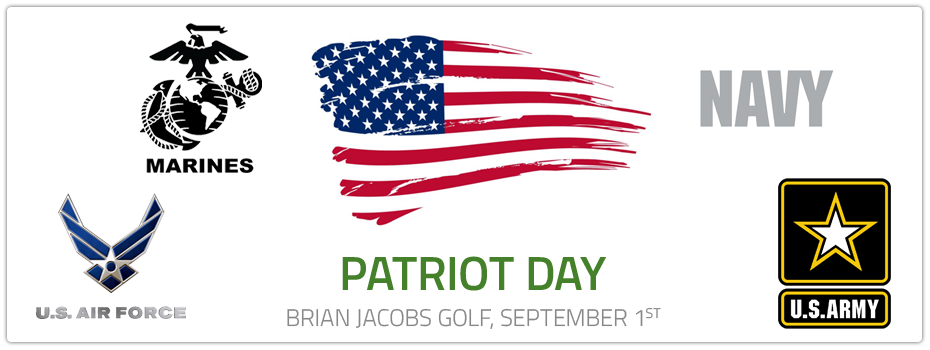
<style>
.page{position:relative;width:930px;height:350px;background:#ffffff}
.page>*{position:absolute;margin:0}
.t1{font:24px/36px "TitilliumWeb-Light";color:#888888;text-transform:uppercase}
.t2{font:48px/36px "TitilliumWeb-SemiBold";color:#45812b;text-transform:uppercase}
</style>
<div class="page">
<p class="t1" style="left:287px;top:256px;width:374px;height:73px;text-align:center"><span class="t2">Patriot Day<br></span>Brian Jacobs Golf, September 1st</p>
</div>
